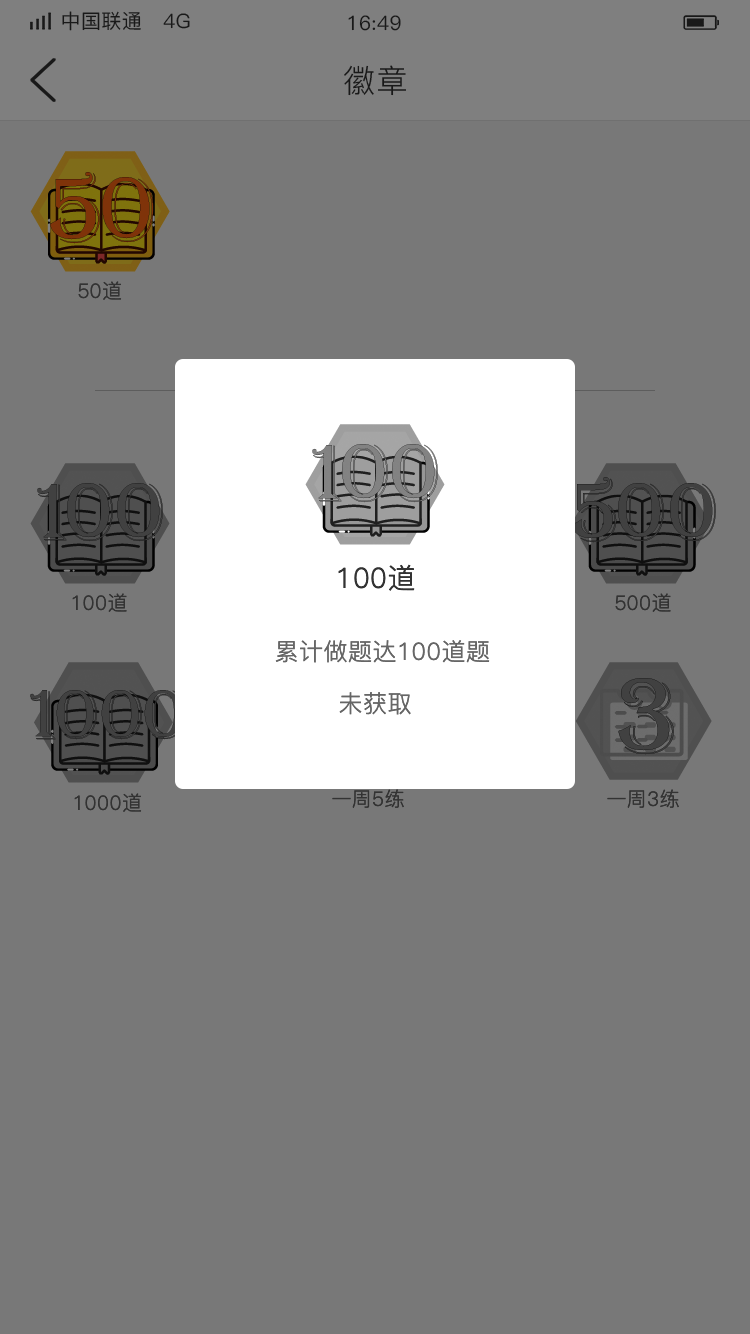
<style>
.page{position:relative;width:750px;height:1334px;background:#787878}
.page>*{position:absolute;margin:0}
.t1{font:20px "PingFang-SC-Medium";letter-spacing:0.02em;color:#191919}
.t2{font:32px "PingFang-SC-Regular";letter-spacing:0.02em;color:#191919}
.t3{font:20px "PingFang-SC-Regular";letter-spacing:0.02em;color:#333333}
.t4{font:28px "PingFang-SC-Regular";letter-spacing:0.02em;color:#333333}
.t5{font:24px "PingFang-SC-Regular";letter-spacing:0.02em;color:#666666}
</style>
<div class="page">
<p class="t1" style="left:62px;top:11px;width:128px;height:20px">中国联通   4G</p>
<p class="t1" style="left:348px;top:15px;width:53px;height:16px">16:49</p>
<p class="t2" style="left:344px;top:65px;width:62px;height:31px">徽章</p>
<p class="t3" style="left:78px;top:281px;width:44px;height:19px">50道</p>
<p class="t4" style="left:338px;top:564px;width:77px;height:27px">100道</p>
<p class="t3" style="left:72px;top:593px;width:55px;height:19px">100道</p>
<p class="t3" style="left:615px;top:593px;width:56px;height:19px">500道</p>
<p class="t5" style="left:275px;top:640px;width:215px;height:23px">累计做题达100道题</p>
<p class="t5" style="left:339px;top:692px;width:72px;height:23px">未获取</p>
<p class="t3" style="left:74px;top:793px;width:68px;height:19px">1000道</p>
<p class="t3" style="left:332px;top:789px;width:72px;height:19px">一周5练</p>
<p class="t3" style="left:607px;top:789px;width:72px;height:19px">一周3练</p>
</div>
